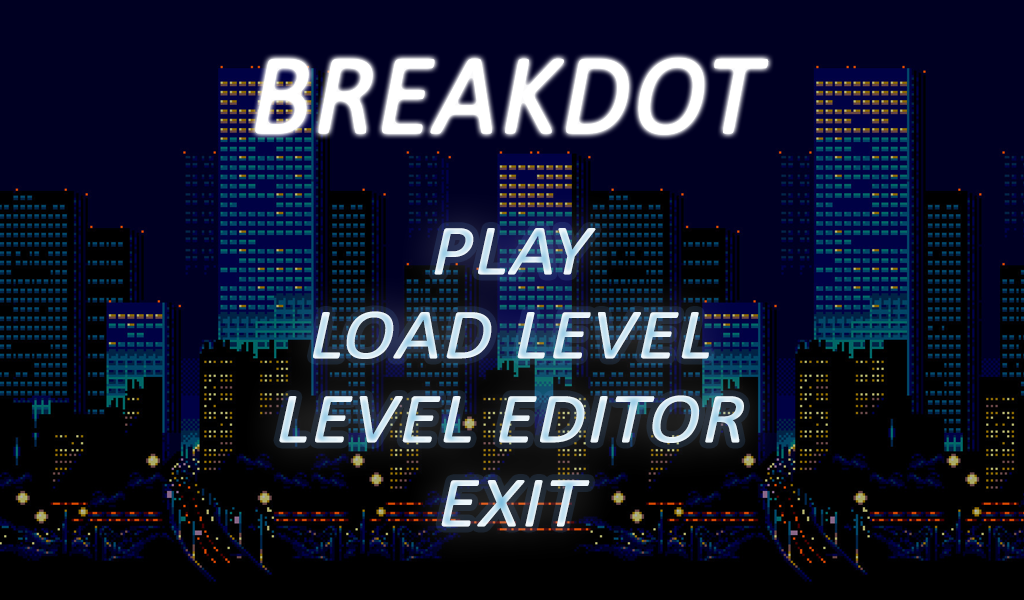
<style>
.page{position:relative;width:1024px;height:600px;background:#000022}
.page>*{position:absolute;margin:0}
.t1{font:116.1px "Calibri-Italic";color:#ffffff;text-transform:uppercase;font-weight:bold;scale:0.96 1}
.t2{font:72px/84px "Calibri-Italic";text-transform:uppercase;font-weight:bold;scale:1.1 1}
</style>
<div class="page">
<p class="t1" style="left:255px;top:58px;width:514px;height:77px">BREAKDOT</p>
<p class="t2" style="left:279px;top:228px;width:465px;height:299px;text-align:center">PLAY<br>LOAD LEVEL<br>LEVEL EDITOR<br>EXIT</p>
</div>
